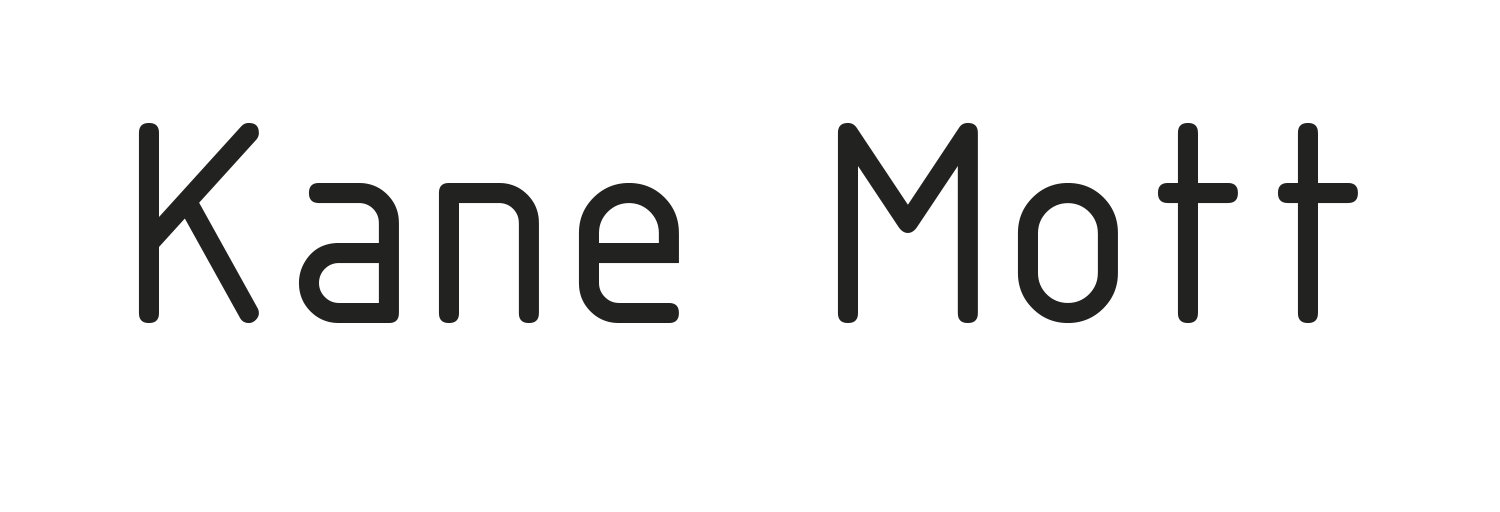
<style>
.page{position:relative;width:1500px;height:512px;background:#ffffff}
.page>*{position:absolute;margin:0}
.t1{font:310px "ISOCPEUR";color:#222221}
</style>
<div class="page">
<p class="t1" style="left:138px;top:123px;width:1220px;height:200px">Kane Mott</p>
</div>
